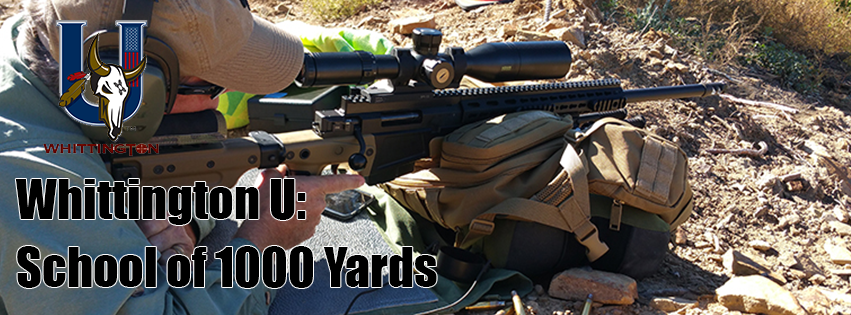
<style>
.page{position:relative;width:851px;height:315px}
.page>*{position:absolute;margin:0}
.t1{font:50px "Impact";color:#000000}
</style>
<div class="page">
<p class="t1" style="left:15px;top:179px;width:291px;height:46px">Whittington U:</p>
<p class="t1" style="left:17px;top:246px;width:420px;height:42px">School of 1000 Yards</p>
</div>
